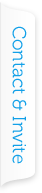
<style>
.page{position:relative;width:42px;height:193px}
.page>*{position:absolute;margin:0}
.t1{font:18.8px "Museo300-Regular";color:#12a0e8}
</style>
<div class="page">
<p class="t1" style="left:12px;top:26px;width:15px;height:138px;rotate:90deg">Contact &amp; Invite</p>
</div>
